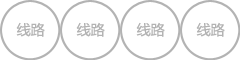
<style>
.page{position:relative;width:240px;height:60px;background:#ffffff}
.page>*{position:absolute;margin:0}
.t1{font:14px "MicrosoftYaHei";color:#b3b3b3}
</style>
<div class="page">
<p class="t1" style="left:16px;top:22px;width:29px;height:15px">线路</p>
<p class="t1" style="left:76px;top:22px;width:29px;height:15px">线路</p>
<p class="t1" style="left:136px;top:22px;width:29px;height:15px">线路</p>
<p class="t1" style="left:196px;top:22px;width:29px;height:15px">线路</p>
</div>
